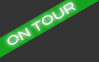
<style>
.page{position:relative;width:99px;height:62px;background:#333333}
.page>*{position:absolute;margin:0}
.t1{font:12px "BlairMdITCTTMedium";color:#ffffff}
</style>
<div class="page">
<p class="t1" style="left:7px;top:2px;width:69px;height:43px;rotate:-30deg">ON TOUR</p>
</div>
